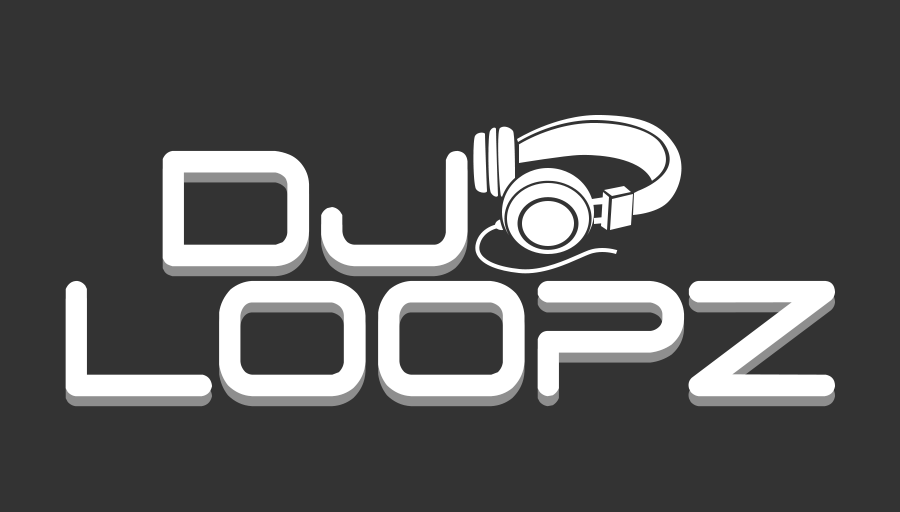
<style>
.page{position:relative;width:900px;height:512px;background:#333333}
.page>*{position:absolute;margin:0}
.t1{font:160px/130px "D3-Euronism-Bold";letter-spacing:0.05em;color:#ffffff}
</style>
<div class="page">
<p class="t1" style="left:65px;top:150px;width:770px;height:247px;text-align:center">DJ<br>  LOOPZ</p>
</div>
